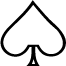
<style>
.page{position:relative;width:66px;height:66px;background:#ffffff}
.page>*{position:absolute;margin:0}
.t1{font:201.7px "AppleSymbols";color:#000000;scale:1.24 1}
</style>
<div class="page">
<p class="t1" style="left:0px;top:0px;width:66px;height:66px">♤</p>
</div>
